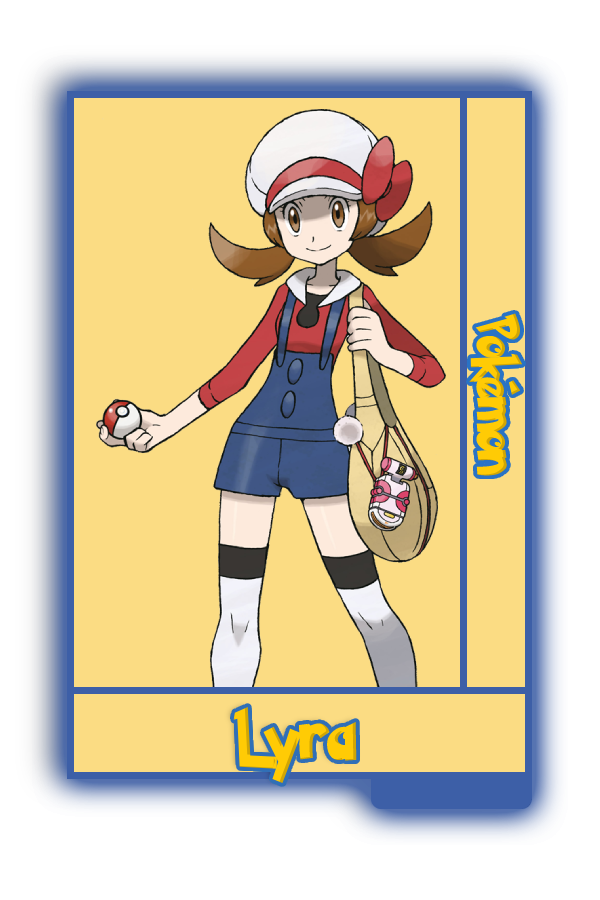
<style>
.page{position:relative;width:600px;height:900px;background:#fbdc83}
.page>*{position:absolute;margin:0}
.t1{font:48.8px "PokemonSolidNormal";color:#ffcb05;scale:0.8 1}
.t2{font:56.6px "PokemonSolidNormal";color:#ffcb05;scale:0.92 1}
</style>
<div class="page">
<p class="t1" style="left:469px;top:313px;width:54px;height:163px;rotate:90deg">Pokémon</p>
<p class="t2" style="left:233px;top:706px;width:124px;height:77px">Lyra</p>
</div>
